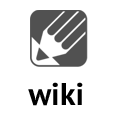
<style>
.page{position:relative;width:114px;height:114px;background:#ffffff}
.page>*{position:absolute;margin:0}
.t1{font:31.5px "PTSans-Bold";color:#000000}
</style>
<div class="page">
<p class="t1" style="left:28px;top:82px;width:55px;height:24px">wiki</p>
</div>
